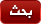
<style>
.page{position:relative;width:41px;height:24px}
.page>*{position:absolute;margin:0}
.t1{font:16px "BEsfehanBold";color:#ffffff;text-transform:uppercase}
</style>
<div class="page">
<p class="t1" style="left:10px;top:5px;width:22px;height:13px">بحث</p>
</div>
